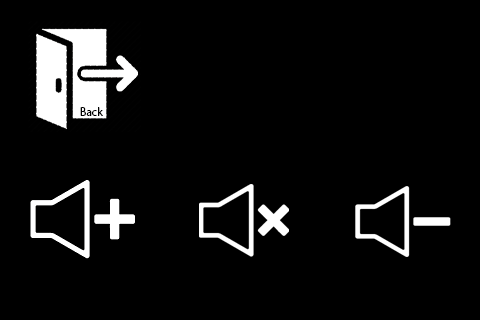
<style>
.page{position:relative;width:480px;height:320px;background:#000000}
.page>*{position:absolute;margin:0}
.t1{font:12px "MyriadPro-Regular";color:#000000}
.t2{font:12px "MyriadPro-Regular";color:#ffffff}
</style>
<div class="page">
<p class="t1" style="left:80px;top:107px;width:23px;height:9px"><span class="t2"><br></span>Back</p>
</div>
